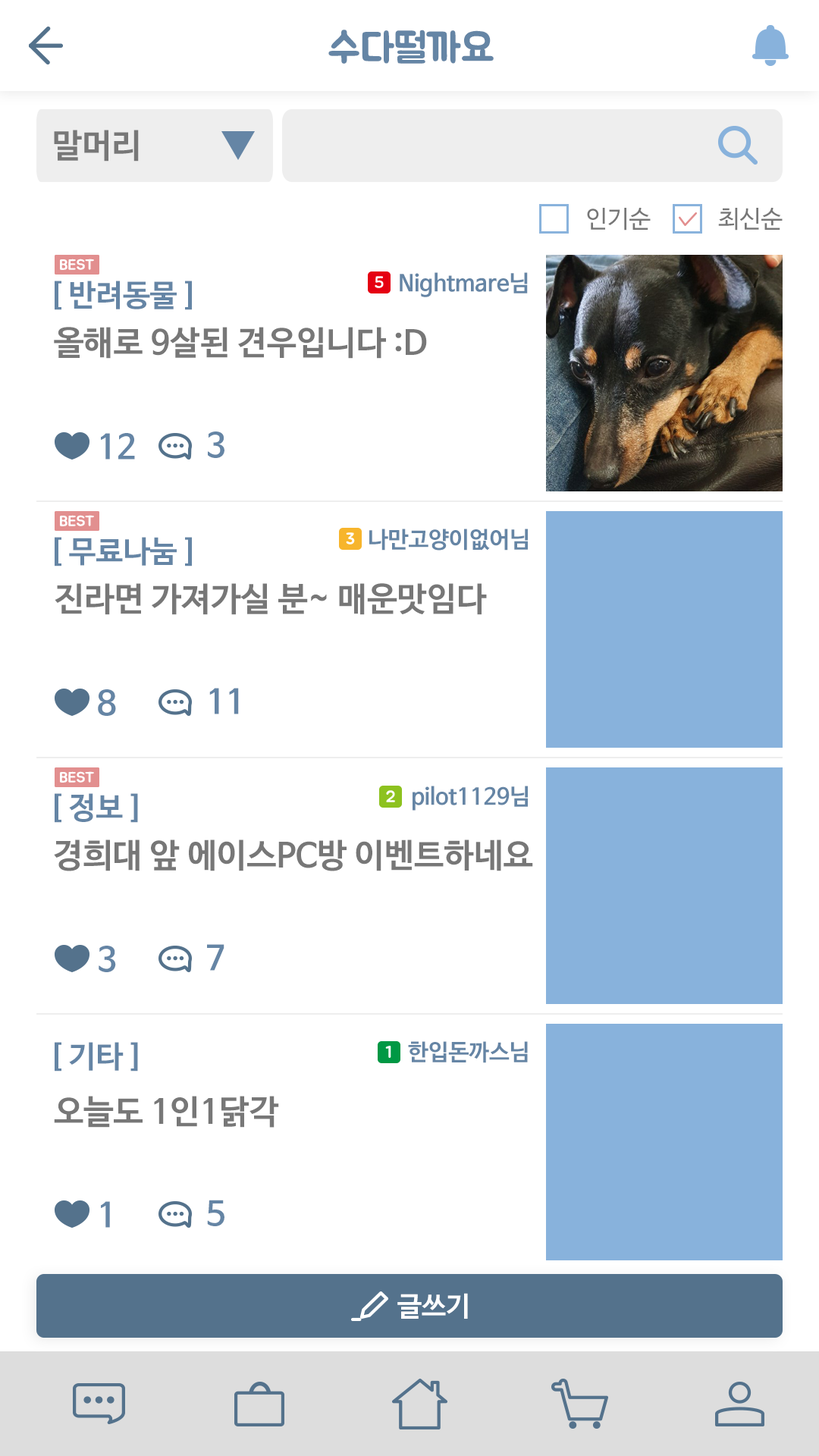
<style>
.page{position:relative;width:819px;height:1456px;background:#ffffff}
.page>*{position:absolute;margin:0}
.t1{font:40.9px "BMJUA";color:#6585a5}
.t2{font:33.4px "NanumBarunGothicBold";color:#777777}
.t3{font:24.3px "NanumBarunGothic";color:#777777}
.t4{font:30.3px "NanumBarunGothicBold";color:#6585a5}
.t5{font:22.7px "NanumBarunGothicBold";color:#6585a5}
.t6{font:33.4px "NanumBarunGothicBold";color:#6585a5}
.t7{font:27.3px "NanumBarunGothicBold";color:#ffffff}
</style>
<div class="page">
<p class="t1" style="left:328px;top:30px;width:166px;height:34px">수다떨까요</p>
<p class="t2" style="left:54px;top:130px;width:85px;height:32px">말머리</p>
<p class="t3" style="left:587px;top:208px;width:64px;height:23px">인기순</p>
<p class="t3" style="left:718px;top:208px;width:65px;height:23px">최신순</p>
<p class="t4" style="left:55px;top:281px;width:137px;height:29px">[ 반려동물 ]</p>
<p class="t5" style="left:400px;top:272px;width:128px;height:25px">Nightmare님</p>
<p class="t2" style="left:54px;top:327px;width:373px;height:32px">올해로 9살된 견우입니다 :D</p>
<p class="t6" style="left:101px;top:433px;width:34px;height:27px">12</p>
<p class="t6" style="left:208px;top:431px;width:16px;height:27px">3</p>
<p class="t5" style="left:369px;top:529px;width:159px;height:22px">나만고양이없어님</p>
<p class="t4" style="left:55px;top:537px;width:137px;height:29px">[ 무료나눔 ]</p>
<p class="t2" style="left:55px;top:583px;width:432px;height:32px">진라면 가져가실 분~ 매운맛임다</p>
<p class="t6" style="left:98px;top:689px;width:18px;height:27px">8</p>
<p class="t6" style="left:209px;top:688px;width:30px;height:26px">11</p>
<p class="t5" style="left:413px;top:786px;width:115px;height:25px">pilot1129님</p>
<p class="t4" style="left:55px;top:793px;width:83px;height:30px">[ 정보 ]</p>
<p class="t2" style="left:54px;top:839px;width:479px;height:32px">경희대 앞 에이스PC방 이벤트하네요</p>
<p class="t6" style="left:99px;top:946px;width:17px;height:26px">3</p>
<p class="t6" style="left:207px;top:944px;width:17px;height:27px">7</p>
<p class="t4" style="left:55px;top:1042px;width:83px;height:30px">[ 기타 ]</p>
<p class="t5" style="left:408px;top:1041px;width:120px;height:22px">한입돈까스님</p>
<p class="t2" style="left:54px;top:1096px;width:225px;height:32px">오늘도 1인1닭각</p>
<p class="t6" style="left:101px;top:1201px;width:9px;height:27px">1</p>
<p class="t6" style="left:207px;top:1200px;width:17px;height:26px">5</p>
<p class="t7" style="left:397px;top:1293px;width:71px;height:26px">글쓰기</p>
</div>
